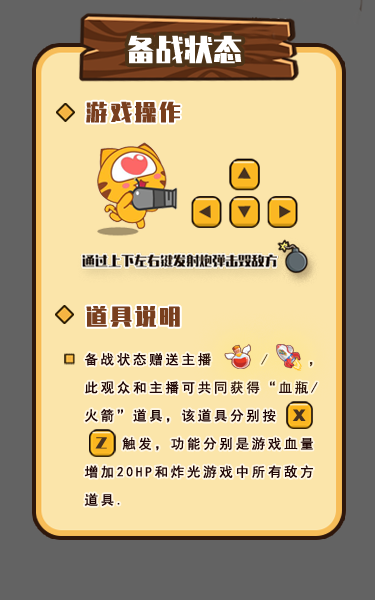
<style>
.page{position:relative;width:375px;height:600px;background:#fbe5aa}
.page>*{position:absolute;margin:0}
.t1{font:28.9px "ZhenyanGB-Regular";color:#ffffff}
.t2{font:21.5px "ZhenyanGB-Regular";letter-spacing:0.14em;color:#793f1e}
.t3{font:13.5px/28.1px "SimHei";letter-spacing:0.2em;color:#1e0404}
.t4{font:12.3px "ZhenyanGB-Regular";letter-spacing:0.1em;color:#493420;scale:1.5 1}
</style>
<div class="page">
<p class="t1" style="left:127px;top:35px;width:115px;height:29px">备战状态</p>
<p class="t2" style="left:86px;top:101px;width:95px;height:22px">游戏操作</p>
<p class="t2" style="left:86px;top:306px;width:94px;height:21px">道具说明</p>
<p class="t3" style="left:84px;top:353px;width:234px;height:153px">备战状态赠送主播     /    ，<br>此观众和主播可共同获得“血瓶/<br>火箭”道具，该道具分别按     <br>    触发，功能分别是游戏血量<br>增加20HP和炸光游戏中所有敌方<br>道具.</p>
<p class="t4" style="left:292px;top:409px;width:14px;height:12px">X</p>
<p class="t4" style="left:95px;top:437px;width:12px;height:12px">Z</p>
</div>
